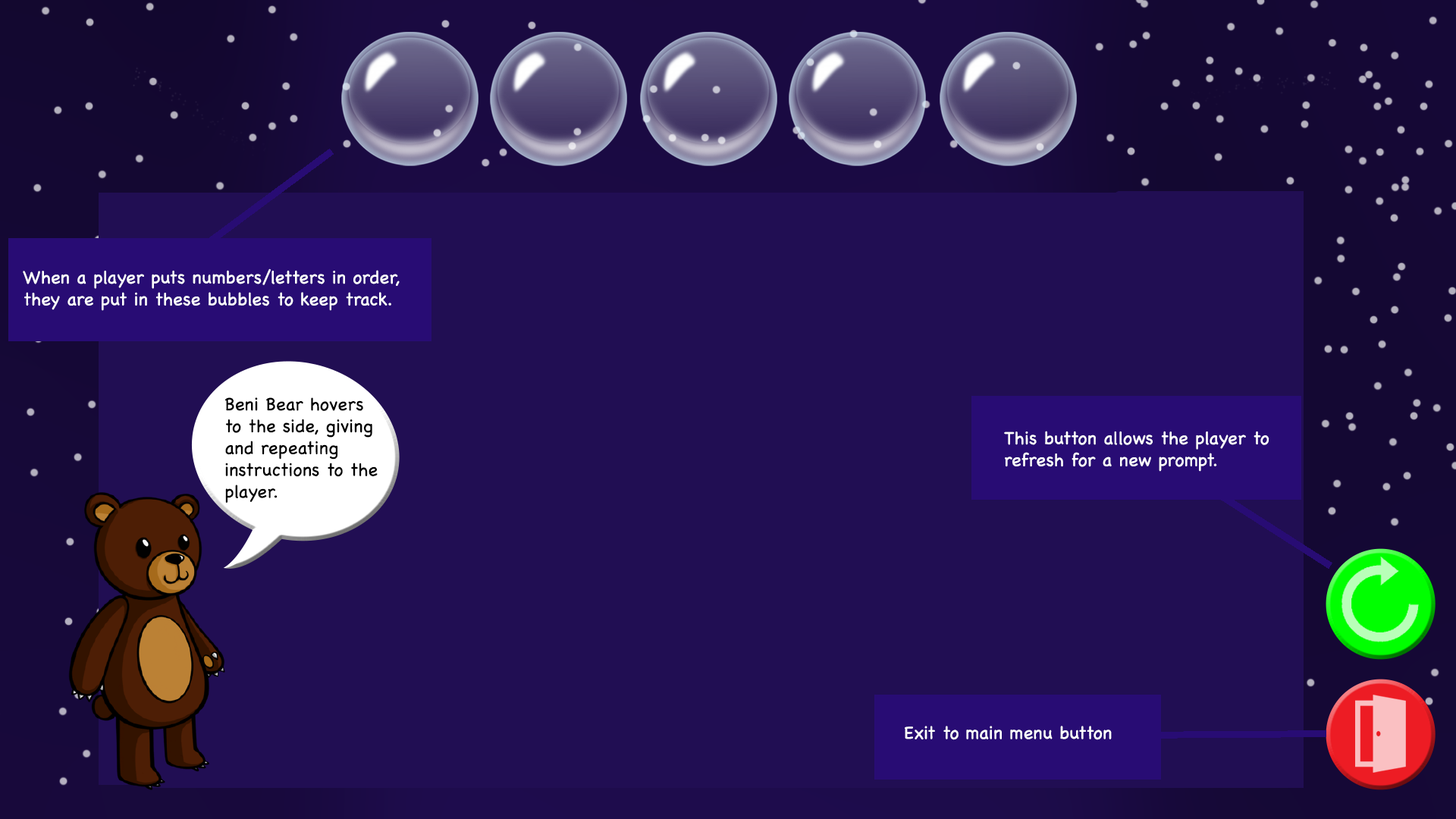
<style>
.page{position:relative;width:1456px;height:819px;background:#210e53}
.page>*{position:absolute;margin:0}
.t1{font:18.2px "Chalkboard";color:#ffffff}
.t2{font:18.2px "Chalkboard";color:#000000}
</style>
<div class="page">
<p class="t1" style="left:23px;top:268px;width:377px;height:43px">When a player puts numbers/letters in order, <br>they are put in these bubbles to keep track.</p>
<p class="t2" style="left:225px;top:397px;width:153px;height:106px">Beni Bear hovers <br>to the side, giving <br>and repeating <br>instructions to the<br>player.</p>
<p class="t1" style="left:1004px;top:431px;width:265px;height:41px">This button allows the player to <br>refresh for a new prompt.</p>
<p class="t1" style="left:905px;top:726px;width:207px;height:14px">Exit to main menu button</p>
</div>
